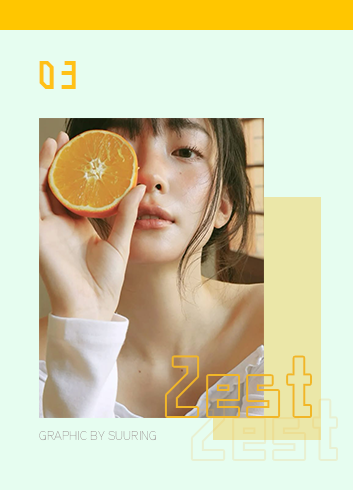
<style>
.page{position:relative;width:353px;height:490px;background:#e6fdf0}
.page>*{position:absolute;margin:0}
.t1{font:12px "H2sa1M";letter-spacing:0.05em;color:#ffc117}
.t2{font:12.5px "AauxNext-Hairline";color:#afaeaa}
</style>
<div class="page">
<p class="t1" style="left:39px;top:61px;width:37px;height:28px;text-align:right">03</p>
<p class="t2" style="left:39px;top:431px;width:117px;height:10px">GRAPHIC BY SUURING</p>
</div>
